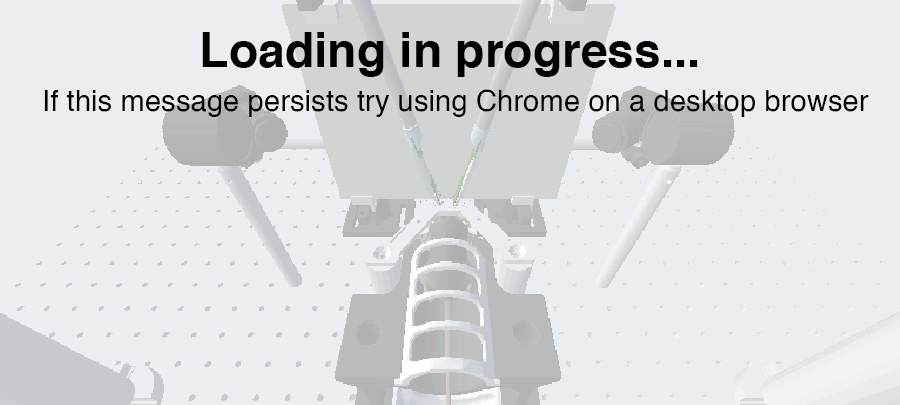
<style>
.page{position:relative;width:900px;height:405px;background:#ebedf0}
.page>*{position:absolute;margin:0}
.t1{font:48px "Helvetica-Bold";color:#000000}
.t2{font:29.3px "Helvetica";color:#000000}
</style>
<div class="page">
<p class="t1" style="left:202px;top:32px;width:496px;height:45px">Loading in progress...</p>
<p class="t2" style="left:44px;top:89px;width:825px;height:28px">If this message persists try using Chrome on a desktop browser</p>
</div>
